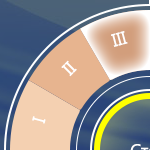
<style>
.page{position:relative;width:150px;height:150px}
.page>*{position:absolute;margin:0}
.t1{font:18px "SegoeUI";color:#ffffff}
</style>
<div class="page">
<p class="t1" style="left:111px;top:31px;width:17px;height:16px;rotate:-15deg">III</p>
<p class="t1" style="left:61px;top:60px;width:16px;height:17px;rotate:-45deg">II</p>
<p class="t1" style="left:32px;top:116px;width:14px;height:8px;rotate:-75deg">I</p>
</div>
